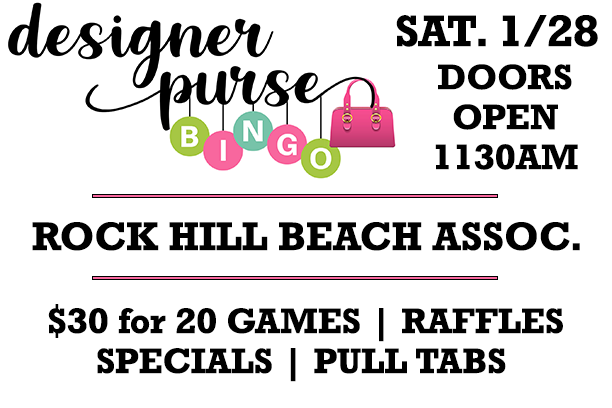
<style>
.page{position:relative;width:612px;height:408px;background:#ffffff}
.page>*{position:absolute;margin:0}
.t1{font:41.7px "Rockwell-Bold";color:#000000}
.t2{font:33.3px "Rockwell-Bold";color:#000000}
.t3{font:37.5px "Rockwell-Bold";color:#000000}
</style>
<div class="page">
<p class="t1" style="left:396px;top:15px;width:202px;height:32px">SAT. 1/28</p>
<p class="t2" style="left:435px;top:64px;width:143px;height:106px;text-align:center">DOORS<br>OPEN<br>1130AM</p>
<p class="t3" style="left:32px;top:222px;width:548px;height:29px">ROCK HILL BEACH ASSOC.</p>
<p class="t2" style="left:48px;top:304px;width:515px;height:78px;text-align:center">$30 for 20 GAMES | RAFFLES<br>SPECIALS | PULL TABS</p>
</div>
